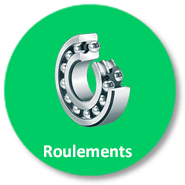
<style>
.page{position:relative;width:185px;height:185px;background:#00cc66}
.page>*{position:absolute;margin:0}
.t1{font:18px "Calibri-Bold";color:#ffffff}
</style>
<div class="page">
<p class="t1" style="left:44px;top:144px;width:88px;height:14px">Roulements</p>
</div>
